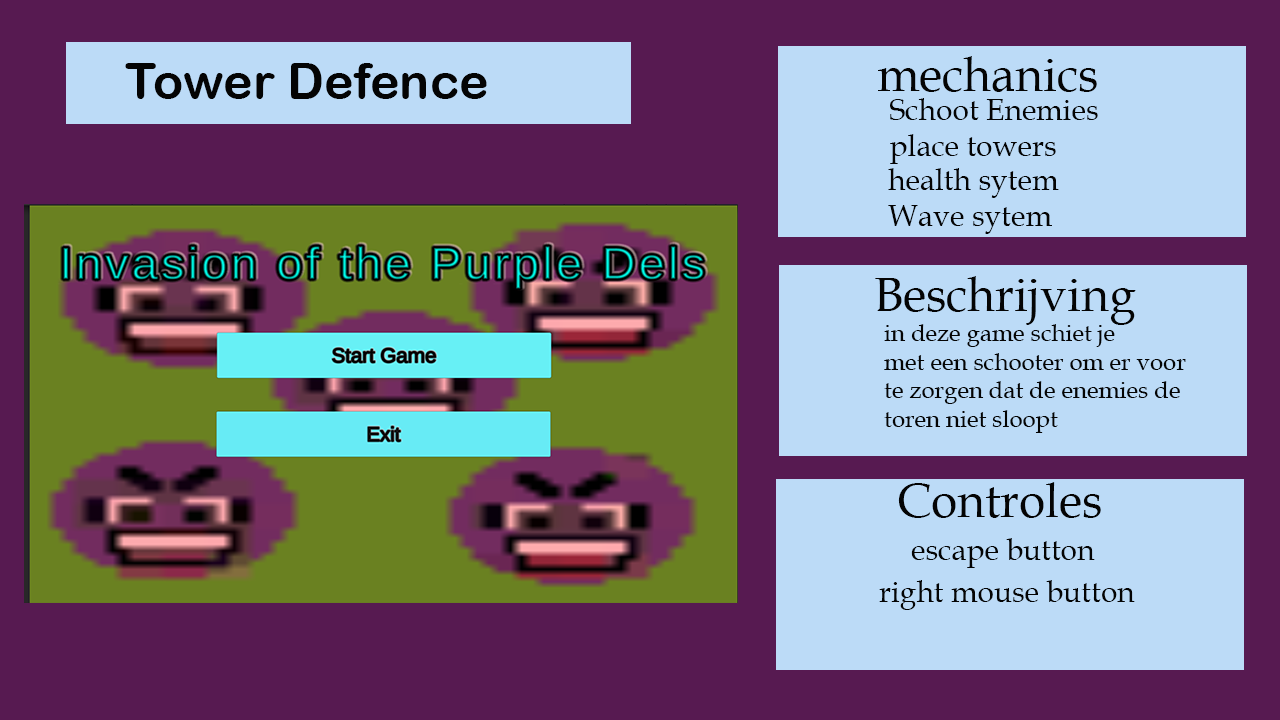
<style>
.page{position:relative;width:1280px;height:720px;background:#571a51}
.page>*{position:absolute;margin:0}
.t1{font:50px "ArialRoundedMTBold";color:#040404}
.t2{font:48px "BookAntiqua";color:#040404}
.t3{font:30px "BookAntiqua";color:#040404}
.t4{font:24px "BookAntiqua";color:#040404}
</style>
<div class="page">
<p class="t1" style="left:125px;top:63px;width:362px;height:36px">Tower Defence</p>
<p class="t2" style="left:878px;top:56px;width:219px;height:36px">mechanics</p>
<p class="t3" style="left:890px;top:98px;width:208px;height:66px">Schoot Enemies<br>place towers</p>
<p class="t3" style="left:888px;top:168px;width:171px;height:66px">health sytem<br>Wave sytem</p>
<p class="t2" style="left:875px;top:276px;width:261px;height:49px">Beschrijving</p>
<p class="t4" style="left:884px;top:324px;width:302px;height:109px">in deze game schiet je<br>met een schooter om er voor <br>te zorgen dat de enemies de <br>toren niet sloopt</p>
<p class="t2" style="left:898px;top:482px;width:203px;height:36px">Controles</p>
<p class="t3" style="left:911px;top:538px;width:184px;height:30px">escape button</p>
<p class="t3" style="left:879px;top:580px;width:256px;height:30px">right mouse button</p>
</div>
